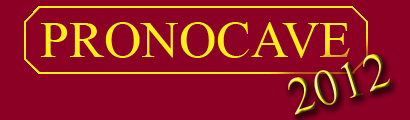
<style>
.page{position:relative;width:410px;height:120px;background:#8c0025}
.page>*{position:absolute;margin:0}
.t1{font:52px "TimesNewRomanPSMT";color:#feef18}
.t2{font:52px "TimesNewRomanPSMT"}
</style>
<div class="page">
<p class="t1" style="left:40px;top:22px;width:310px;height:36px">PRONOCAVE</p>
<p class="t2" style="left:288px;top:54px;width:102px;height:61px;rotate:-17deg">2012</p>
</div>
